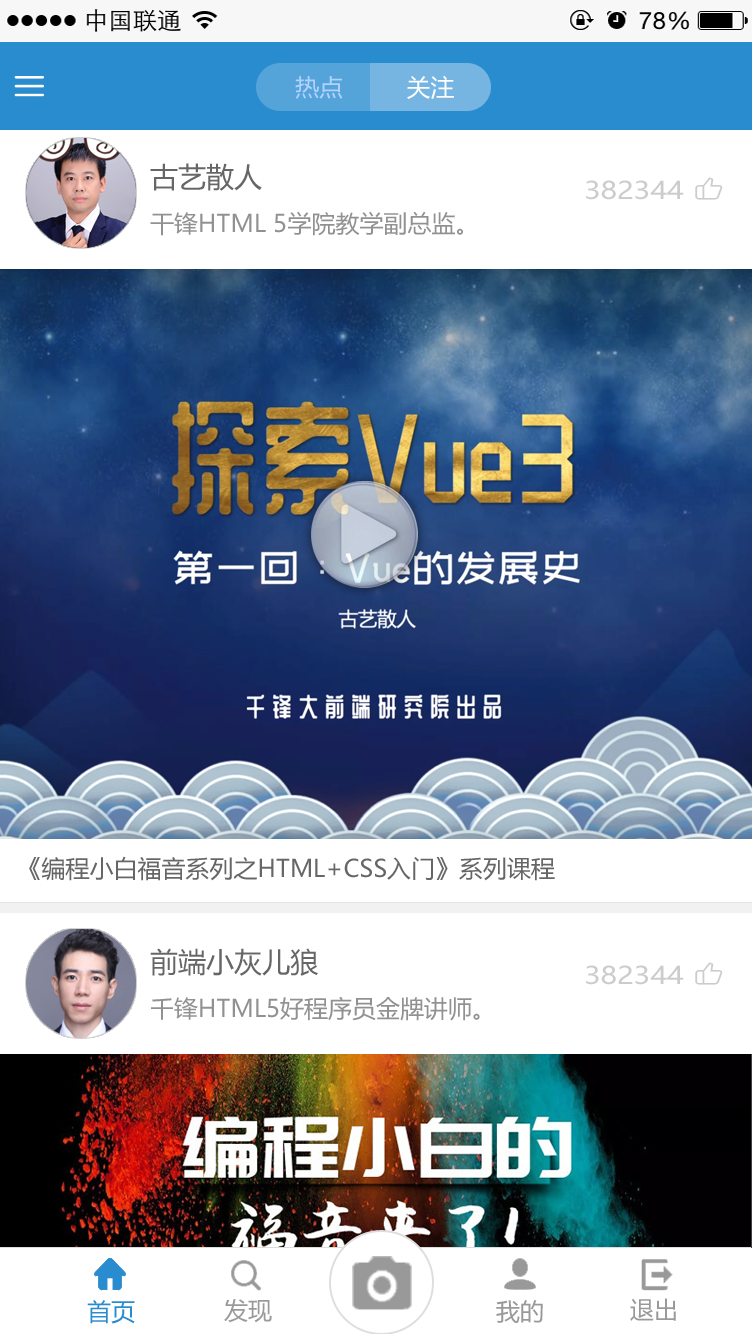
<style>
.page{position:relative;width:752px;height:1334px;background:#ffffff}
.page>*{position:absolute;margin:0}
.t1{font:24px "MicrosoftYaHei";color:#b2d1ff}
.t2{font:24px "MicrosoftYaHei";color:#ffffff}
.t3{font:24px/48px "MicrosoftYaHei";color:#919191}
.t4{font:28px/48px "MicrosoftYaHei";color:#666666}
.t5{font:24px "MicrosoftYaHei";color:#cccccc;scale:1.18 1}
.t6{font:24px "MicrosoftYaHei";color:#666666}
.t7{font:24px "MicrosoftYaHei";color:#298ccf}
.t8{font:24px "MicrosoftYaHei";color:#999999}
</style>
<div class="page">
<p class="t1" style="left:295px;top:75px;width:159px;height:24px">热点<span class="t2">         关注</span></p>
<p class="t3" style="left:150px;top:163px;width:313px;height:73px"><span class="t4">古艺散人<br></span>干锋HTML 5学院教学副总监。</p>
<p class="t5" style="left:586px;top:180px;width:98px;height:20px">382344</p>
<p class="t6" style="left:29px;top:856px;width:526px;height:25px">《编程小白福音系列之HTML+CSS入门》系列课程</p>
<p class="t3" style="left:150px;top:948px;width:330px;height:73px"><span class="t4">前端小灰儿狼<br></span>千锋HTML5好程序员金牌讲师。</p>
<p class="t5" style="left:586px;top:965px;width:98px;height:20px">382344</p>
<p class="t7" style="left:87px;top:1300px;width:48px;height:24px">首页</p>
<p class="t8" style="left:224px;top:1299px;width:48px;height:24px">发现</p>
<p class="t8" style="left:496px;top:1300px;width:47px;height:23px">我的</p>
<p class="t8" style="left:630px;top:1298px;width:46px;height:23px">退出</p>
</div>
